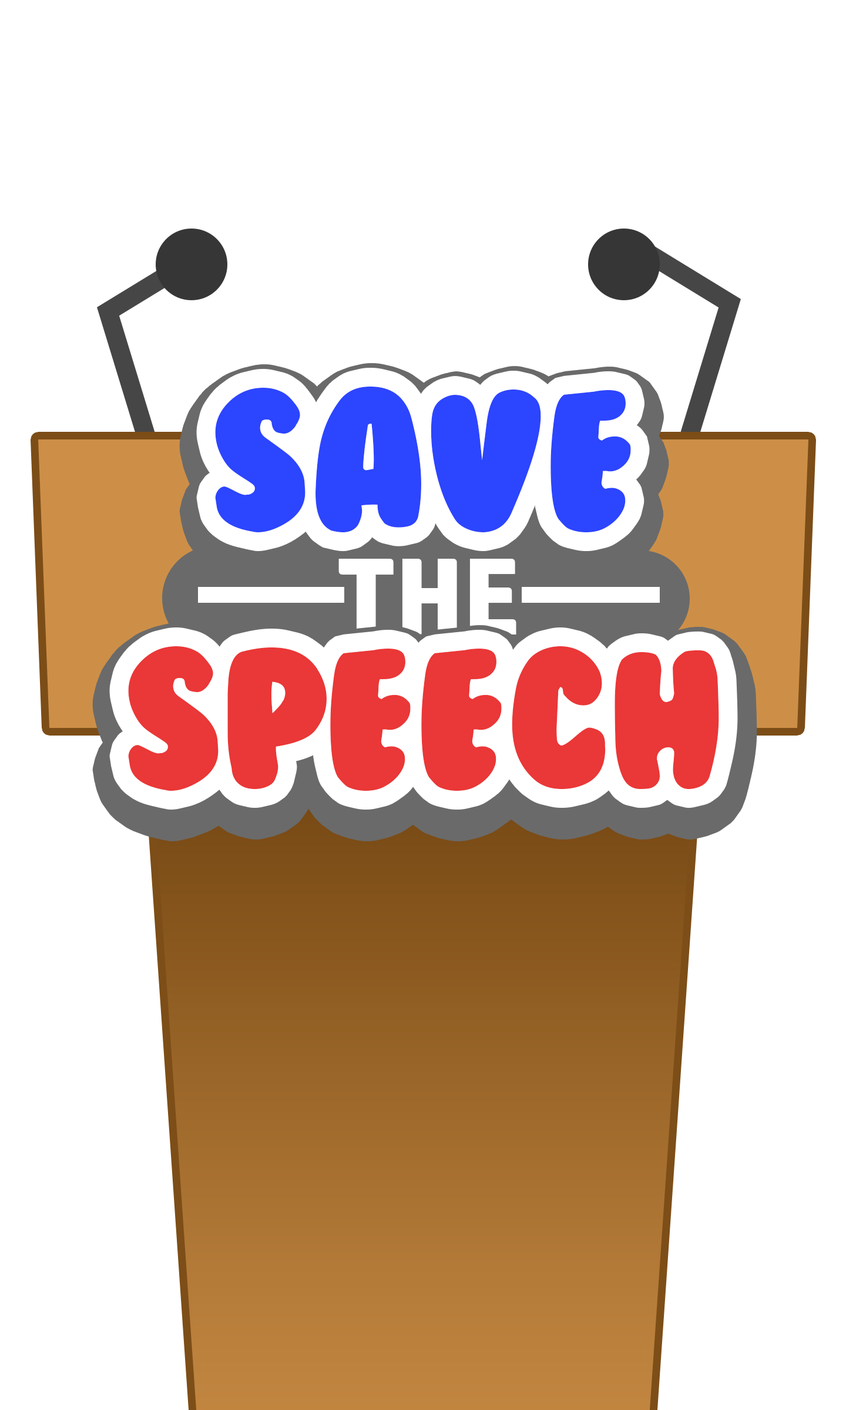
<style>
.page{position:relative;width:846px;height:1410px;background:#ffffff}
.page>*{position:absolute;margin:0}
.t1{font:181.1px "BubbleGum";color:#2c45ff}
.t2{font:109.1px "HPSimplified-Bold";color:#ffffff}
.t3{font:181.1px "BubbleGum";color:#ea3737}
</style>
<div class="page">
<p class="t1" style="left:215px;top:387px;width:416px;height:145px">Save</p>
<p class="t2" style="left:338px;top:559px;width:178px;height:75px">THE</p>
<p class="t3" style="left:128px;top:646px;width:591px;height:145px">Speech</p>
</div>
